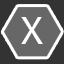
<style>
.page{position:relative;width:64px;height:64px;background:#676767}
.page>*{position:absolute;margin:0}
.t1{font:36px "BellGothicStd-Bold";color:#ffffff}
</style>
<div class="page">
<p class="t1" style="left:21px;top:17px;width:22px;height:27px">X</p>
</div>
